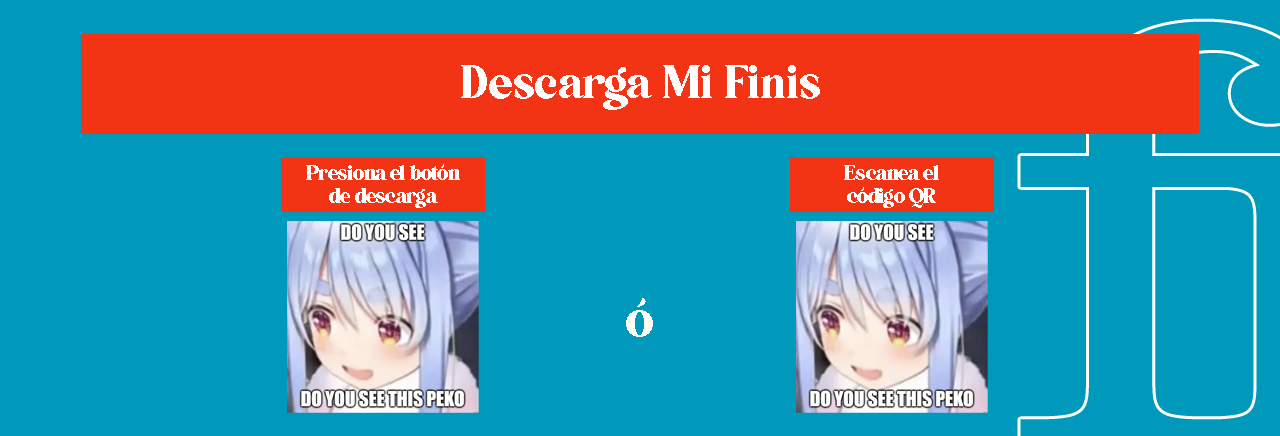
<style>
.page{position:relative;width:1280px;height:436px;background:#0099bb}
.page>*{position:absolute;margin:0}
.t1{font:45px "5thAvenue";color:#ffffff}
.t2{font:19.6px "5thAvenue";color:#feffff}
.t3{font:50px "5thAvenue";color:#feffff}
</style>
<div class="page">
<p class="t1" style="left:461px;top:65px;width:359px;height:45px">Descarga Mi Finis</p>
<p class="t2" style="left:306px;top:164px;width:154px;height:44px;text-align:center">Presiona el botón<br>de descarga</p>
<p class="t2" style="left:844px;top:165px;width:95px;height:43px;text-align:center">Escanea el<br>código QR</p>
<p class="t3" style="left:626px;top:298px;width:27px;height:39px">ó</p>
</div>
